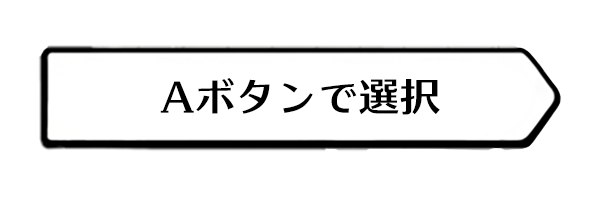
<style>
.page{position:relative;width:600px;height:200px;background:#ffffff}
.page>*{position:absolute;margin:0}
.t1{font:41px "SicPrintempsPetitE";color:#000000}
</style>
<div class="page">
<p class="t1" style="left:160px;top:78px;width:280px;height:37px">Aボタンで選択</p>
</div>
